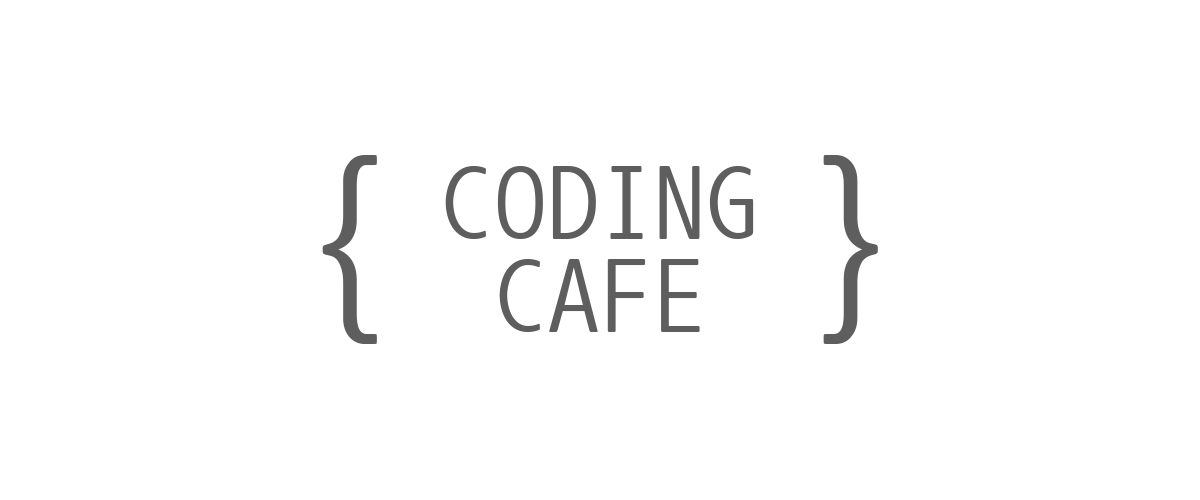
<style>
.page{position:relative;width:1200px;height:500px;background:#ffffff}
.page>*{position:absolute;margin:0}
.t1{font:198.7px "NanumGothicCoding";color:#5e5e5e;text-transform:uppercase}
.t2{font:106.4px/93px "NanumGothicCoding";color:#5e5e5e;text-transform:uppercase}
</style>
<div class="page">
<p class="t1" style="left:322px;top:155px;width:556px;height:189px">{    }</p>
<p class="t2" style="left:445px;top:166px;width:309px;height:166px;text-align:center">coding<br>cafe</p>
</div>
